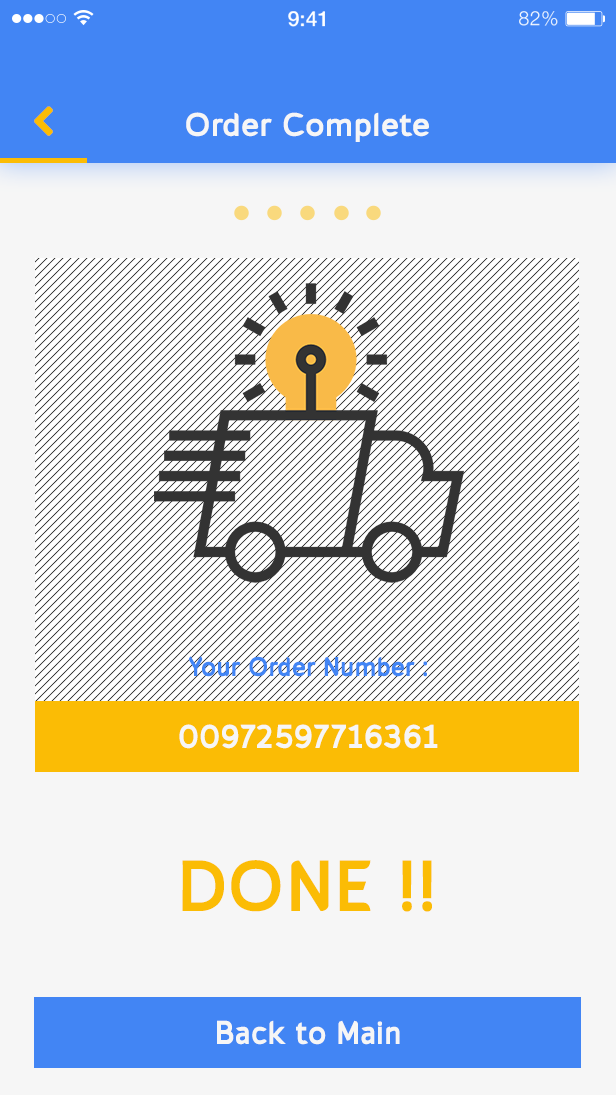
<style>
.page{position:relative;width:616px;height:1095px;background:#f6f6f6}
.page>*{position:absolute;margin:0}
.t1{font:21.3px "HelveticaNeue-Medium";color:#ffffff}
.t2{font:19.6px "HelveticaNeue-Light";letter-spacing:0.025em;color:#ffffff}
.t3{font:33px "cajitobold";color:#f6f6f6}
.t4{font:27px "cajitobold";color:#4285f4;scale:0.94 1}
.t5{font:33px "cajitobold";color:#f6f6f6;scale:0.94 1}
.t6{font:72px "cajitobold";color:#fbbc05}
</style>
<div class="page">
<p class="t1" style="left:288px;top:11px;width:37px;height:16px">9:41</p>
<p class="t2" style="left:519px;top:11px;width:39px;height:15px">82%</p>
<p class="t3" style="left:186px;top:112px;width:243px;height:30px">Order Complete</p>
<p class="t4" style="left:189px;top:656px;width:238px;height:21px">Your Order Number :</p>
<p class="t5" style="left:179px;top:724px;width:259px;height:25px">00972597716361</p>
<p class="t6" style="left:182px;top:860px;width:250px;height:52px">DONE !!</p>
<p class="t5" style="left:217px;top:1020px;width:183px;height:25px">Back to Main</p>
</div>
